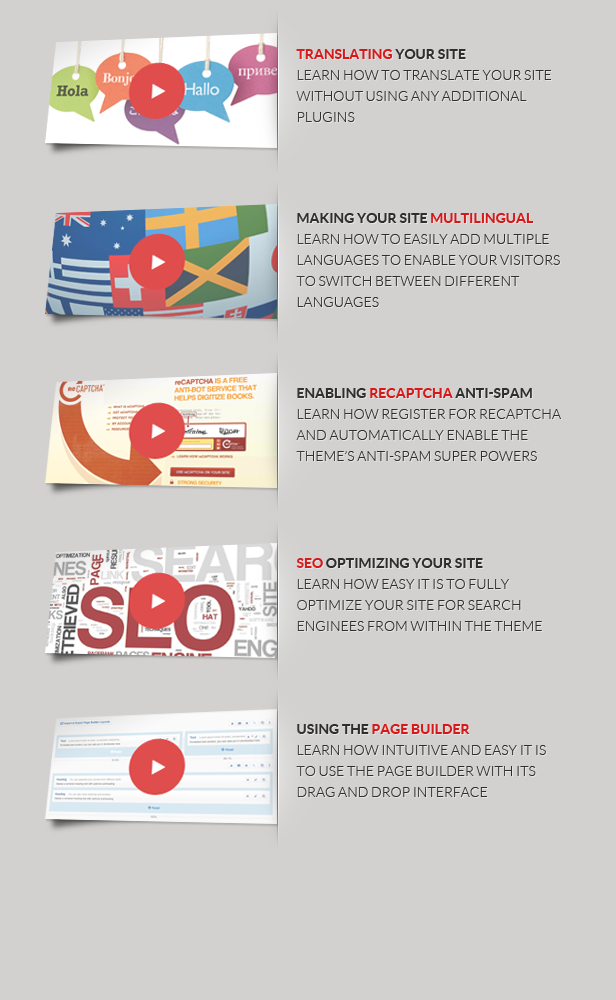
<style>
.page{position:relative;width:616px;height:1000px;background:#d2d1d0}
.page>*{position:absolute;margin:0}
.t1{font:14px/21px "Lato-Light";color:#2e2e2e}
.t2{font:14px/21px "Lato-Bold";color:#d71818}
.t3{font:14px/21px "Lato-Bold";color:#2e2e2e}
</style>
<div class="page">
<p class="t1" style="left:296px;top:49px;width:255px;height:73px"><span class="t2">TRANSLATING </span><span class="t3">YOUR SITE<br></span>LEARN HOW TO TRANSLATE YOUR SITE WITHOUT USING ANY ADDITIONAL PLUGINS</p>
<p class="t1" style="left:296px;top:213px;width:264px;height:94px"><span class="t3">MAKING YOUR SITE </span><span class="t2">MULTILINGUAL<br></span>LEARN HOW TO EASILY ADD MULTIPLE LANGUAGES TO ENABLE YOUR VISITORS TO SWITCH BETWEEN DIFFERENT LANGUAGES</p>
<p class="t1" style="left:296px;top:388px;width:265px;height:73px"><span class="t3">ENABLING </span><span class="t2">RECAPTCHA </span><span class="t3">ANTI-SPAM<br></span>LEARN HOW REGISTER FOR RECAPTCHA AND AUTOMATICALLY ENABLE THE THEME’S ANTI-SPAM SUPER POWERS</p>
<p class="t1" style="left:296px;top:558px;width:246px;height:73px"><span class="t2">SEO </span><span class="t3">OPTIMIZING YOUR SITE<br></span>LEARN HOW EASY IT IS TO FULLY OPTIMIZE YOUR SITE FOR SEARCH ENGINEES FROM WITHIN THE THEME</p>
<p class="t1" style="left:296px;top:724px;width:250px;height:73px"><span class="t3">USING THE</span><span class="t2"> PAGE BUILDER<br></span>LEARN HOW INTUITIVE AND EASY IT IS TO USE THE PAGE BUILDER WITH ITS DRAG AND DROP INTERFACE</p>
</div>
